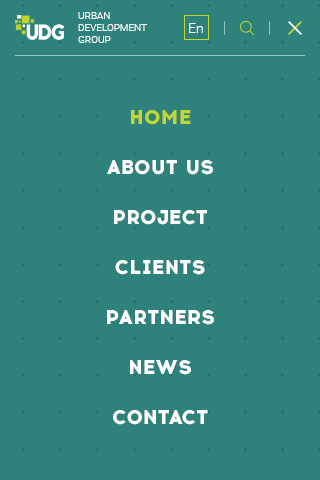
<style>
.page{position:relative;width:320px;height:480px;background:#2e827b}
.page>*{position:absolute;margin:0}
.t1{font:10px "Roboto-Light";color:#ffffff;text-transform:uppercase}
.t2{font:14px "Roboto-Light";color:#ffffff}
.t3{font:20px/50px "Acrom-ExtraBold";color:#ffffff;text-transform:uppercase}
.t4{font:20px/50px "Acrom-ExtraBold";color:#bfd730;text-transform:uppercase}
</style>
<div class="page">
<p class="t1" style="left:78px;top:12px;width:69px;height:31px">urban<br>Development<br>Group</p>
<p class="t2" style="left:189px;top:23px;width:14px;height:10px">En</p>
<p class="t3" style="left:107px;top:110px;width:107px;height:315px;text-align:center"><span class="t4">Home<br></span>About us<br>Project<br>Clients<br>Partners<br>News<br>Contact</p>
</div>
